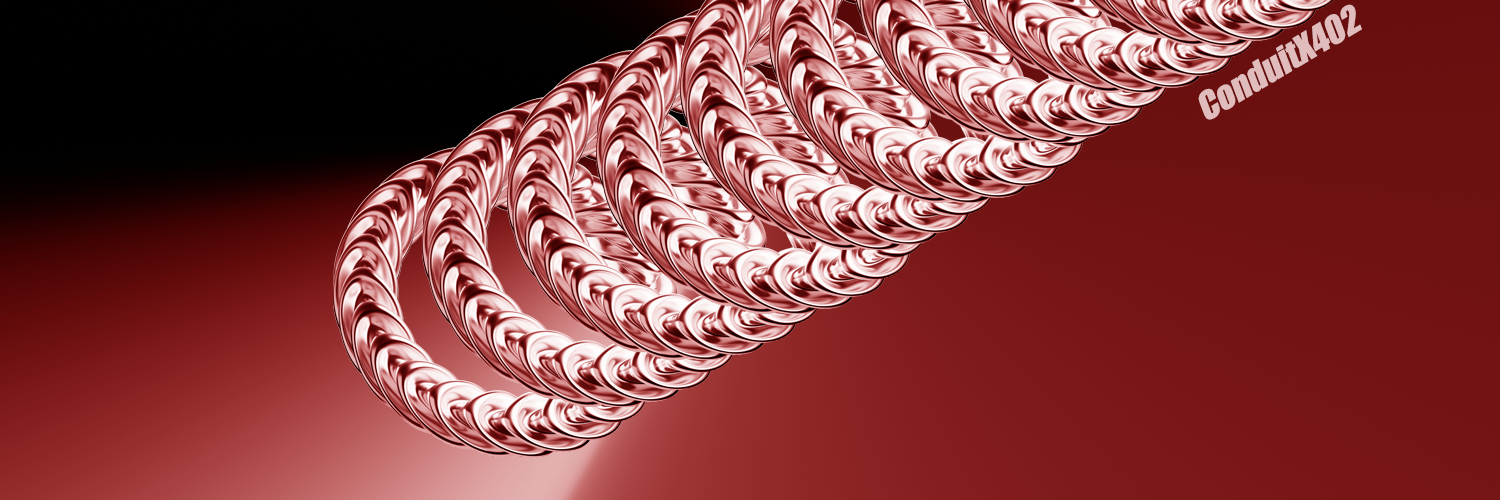
<style>
.page{position:relative;width:1500px;height:500px}
.page>*{position:absolute;margin:0}
.t1{font:35px "Impact";color:#e1bcbc;font-style:italic}
</style>
<div class="page">
<p class="t1" style="left:1198px;top:4px;width:164px;height:116px;rotate:-31deg">ConduitX402</p>
</div>
